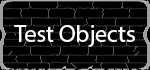
<style>
.page{position:relative;width:150px;height:70px;background:#000000}
.page>*{position:absolute;margin:0}
.t1{font:24px "MyriadPro-Regular";color:#ffffff}
</style>
<div class="page">
<p class="t1" style="left:14px;top:25px;width:121px;height:22px">Test Objects</p>
</div>
